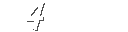
<style>
.page{position:relative;width:128px;height:32px;background:#ffffff}
.page>*{position:absolute;margin:0}
.t1{font:43px "DomDiagonalBT-Regular";letter-spacing:0.075em;color:#ffffff;scale:1.05 1}
</style>
<div class="page">
<p class="t1" style="left:25px;top:2px;width:20px;height:29px">4</p>
</div>
